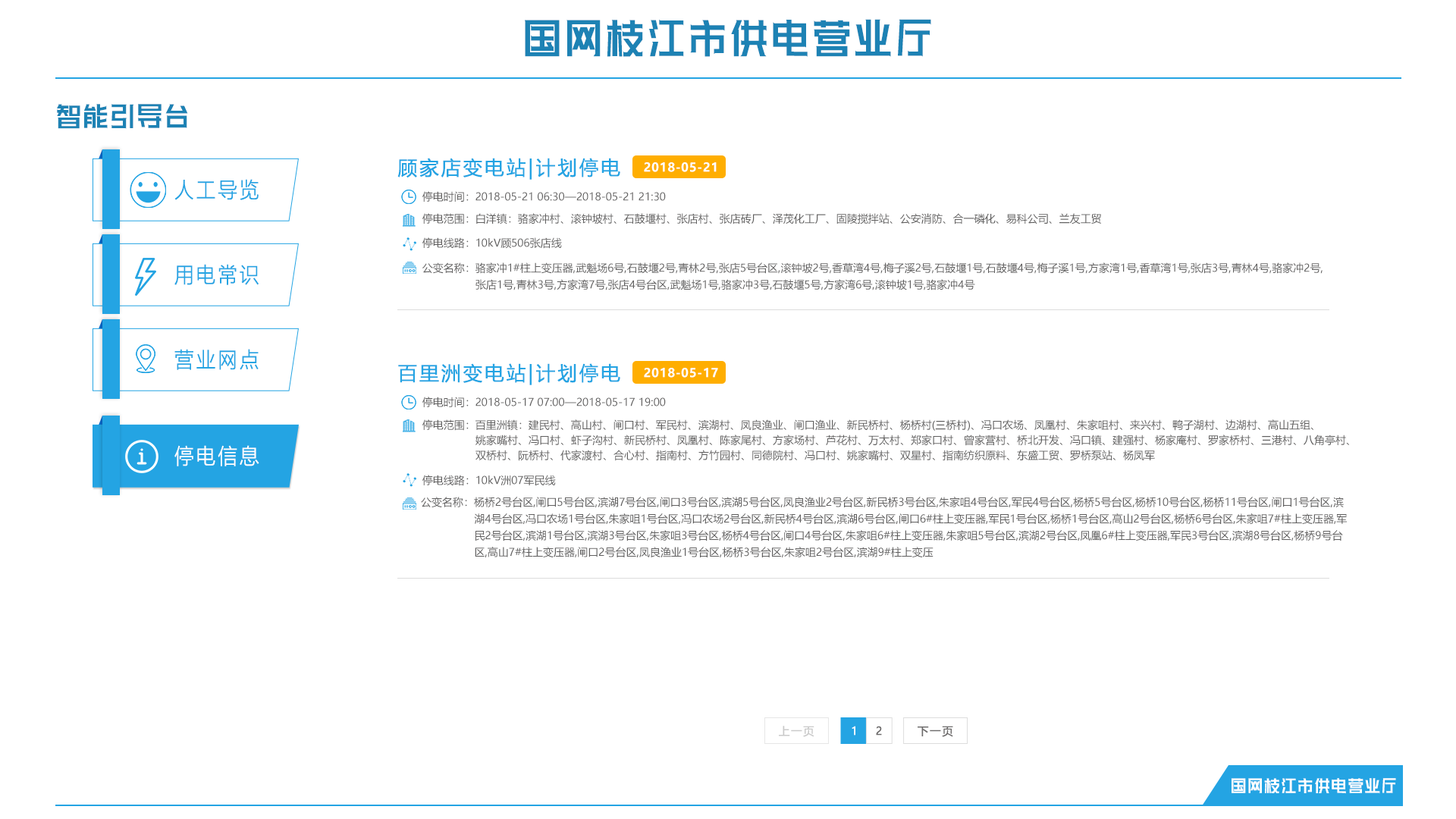
<style>
.page{position:relative;width:1456px;height:819px;background:#ffffff}
.page>*{position:absolute;margin:0}
.t1{font:61.3px "HuXiaoBoKuHei";letter-spacing:0.1em;color:#1d82b4;scale:0.61 1}
.t2{font:40.1px "HuXiaoBoKuHei";letter-spacing:0.1em;color:#1d82b4;scale:0.61 1}
.t3{font:19.3px "MicrosoftYaHei";letter-spacing:0.1em;color:#24a4e3;font-weight:bold}
.t4{font:12.1px "MicrosoftYaHei-Bold";letter-spacing:0.04em;color:#ffffff}
.t5{font:21.4px "MicrosoftYaHeiLight";letter-spacing:0.1em;color:#24a4e3;font-weight:bold;scale:0.9 1}
.t6{font:10.6px "MicrosoftYaHei";color:#605f5f}
.t7{font:10.6px/16.7px "MicrosoftYaHei";color:#605f5f}
.t8{font:10.6px/15.2px "MicrosoftYaHei";color:#605f5f}
.t9{font:21.4px "MicrosoftYaHeiLight";letter-spacing:0.1em;color:#ffffff;font-weight:bold;scale:0.9 1}
.t10{font:11px "MicrosoftYaHei";letter-spacing:0.1em;color:#cacaca;font-weight:bold}
.t11{font:11px "MicrosoftYaHei";letter-spacing:0.1em;color:#ffffff;font-weight:bold}
.t12{font:11px "MicrosoftYaHei";letter-spacing:0.1em;color:#6c6a6a;font-weight:bold}
.t13{font:24.8px "HuXiaoBoKuHei";letter-spacing:0.1em;color:#ffffff;scale:0.61 1}
</style>
<div class="page">
<p class="t1" style="left:525px;top:19px;width:406px;height:38px">国网枝江市供电营业厅</p>
<p class="t2" style="left:57px;top:104px;width:131px;height:25px">智能引导台</p>
<p class="t3" style="left:397px;top:158px;width:223px;height:22px">顾家店变电站|计划停电</p>
<p class="t4" style="left:644px;top:162px;width:73px;height:10px">2018-05-21</p>
<p class="t5" style="left:174px;top:179px;width:85px;height:21px">人工导览</p>
<p class="t6" style="left:422px;top:191px;width:244px;height:11px">停电时间：2018-05-21 06:30—2018-05-21 21:30</p>
<p class="t6" style="left:422px;top:213px;width:679px;height:11px">停电范围：白洋镇：骆家冲村、滚钟坡村、石鼓堰村、张店村、张店砖厂、泽茂化工厂、固陵搅拌站、公安消防、合一磷化、易科公司、兰友工贸</p>
<p class="t6" style="left:422px;top:237px;width:140px;height:12px">停电线路：10kV顾506张店线</p>
<p class="t5" style="left:174px;top:264px;width:85px;height:21px">用电常识</p>
<p class="t7" style="left:422px;top:262px;width:901px;height:28px">公变名称：骆家冲1#柱上变压器,武魁场6号,石鼓堰2号,青林2号,张店5号台区,滚钟坡2号,香草湾4号,梅子溪2号,石鼓堰1号,石鼓堰4号,梅子溪1号,方家湾1号,香草湾1号,张店3号,青林4号,骆家冲2号,<br>                 张店1号,青林3号,方家湾7号,张店4号台区,武魁场1号,骆家冲3号,石鼓堰5号,方家湾6号,滚钟坡1号,骆家冲4号</p>
<p class="t5" style="left:174px;top:349px;width:85px;height:21px">营业网点</p>
<p class="t3" style="left:398px;top:363px;width:222px;height:22px">百里洲变电站|计划停电</p>
<p class="t4" style="left:644px;top:368px;width:74px;height:10px">2018-05-17</p>
<p class="t6" style="left:422px;top:397px;width:244px;height:10px">停电时间：2018-05-17 07:00—2018-05-17 19:00</p>
<p class="t8" style="left:422px;top:419px;width:927px;height:42px">停电范围：百里洲镇：建民村、高山村、闸口村、军民村、滨湖村、凤良渔业、闸口渔业、新民桥村、杨桥村(三桥村)、冯口农场、凤凰村、朱家咀村、来兴村、鸭子湖村、边湖村、高山五组、<br>                 姚家嘴村、冯口村、虾子沟村、新民桥村、凤凰村、陈家尾村、方家场村、芦花村、万太村、郑家口村、曾家营村、桥北开发、冯口镇、建强村、杨家庵村、罗家桥村、三港村、八角亭村、<br>                 双桥村、阮桥村、代家渡村、合心村、指南村、方竹园村、同德院村、冯口村、姚家嘴村、双星村、指南纺织原料、东盛工贸、罗桥泵站、杨凤军</p>
<p class="t9" style="left:174px;top:445px;width:85px;height:21px">停电信息</p>
<p class="t6" style="left:422px;top:475px;width:134px;height:11px">停电线路：10kV洲07军民线</p>
<p class="t7" style="left:421px;top:497px;width:926px;height:60px">公变名称：杨桥2号台区,闸口5号台区,滨湖7号台区,闸口3号台区,滨湖5号台区,凤良渔业2号台区,新民桥3号台区,朱家咀4号台区,军民4号台区,杨桥5号台区,杨桥10号台区,杨桥11号台区,闸口1号台区,滨<br>                 湖4号台区,冯口农场1号台区,朱家咀1号台区,冯口农场2号台区,新民桥4号台区,滨湖6号台区,闸口6#柱上变压器,军民1号台区,杨桥1号台区,高山2号台区,杨桥6号台区,朱家咀7#柱上变压器,军<br>                 民2号台区,滨湖1号台区,滨湖3号台区,朱家咀3号台区,杨桥4号台区,闸口4号台区,朱家咀6#柱上变压器,朱家咀5号台区,滨湖2号台区,凤凰6#柱上变压器,军民3号台区,滨湖8号台区,杨桥9号台<br>                 区,高山7#柱上变压器,闸口2号台区,凤良渔业1号台区,杨桥3号台区,朱家咀2号台区,滨湖9#柱上变压</p>
<p class="t10" style="left:779px;top:726px;width:35px;height:11px">上一页</p>
<p class="t11" style="left:852px;top:726px;width:3px;height:10px">1</p>
<p class="t12" style="left:876px;top:726px;width:6px;height:10px">2</p>
<p class="t12" style="left:918px;top:726px;width:35px;height:11px">下一页</p>
<p class="t13" style="left:1231px;top:778px;width:165px;height:16px">国网枝江市供电营业厅</p>
</div>
